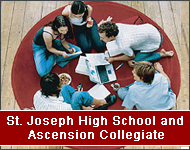
<style>
.page{position:relative;width:190px;height:150px}
.page>*{position:absolute;margin:0}
.t1{font:12px/14px "ArialMT";color:#ffffff;font-weight:bold}
</style>
<div class="page">
<p class="t1" style="left:7px;top:116px;width:176px;height:25px;text-align:center">St. Joseph High School and <br>Ascension Collegiate</p>
</div>
